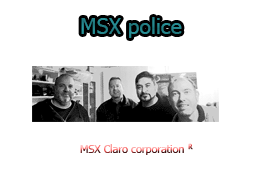
<style>
.page{position:relative;width:256px;height:192px;background:#ffffff}
.page>*{position:absolute;margin:0}
.t1{font:10.7px "Tahoma"}
.t2{font:6.7px "Tahoma";color:#d94948}
</style>
<div class="page">
<p class="t1" style="left:80px;top:144px;width:104px;height:11px">MSX Claro corporation</p>
<p class="t2" style="left:188px;top:143px;width:5px;height:7px">R</p>
</div>
